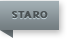
<style>
.page{position:relative;width:70px;height:40px}
.page>*{position:absolute;margin:0}
.t1{font:10.8px "Delicious-Bold";letter-spacing:0.025em;color:#4b5254;font-weight:bold;scale:1.32 1}
</style>
<div class="page">
<p class="t1" style="left:12px;top:11px;width:36px;height:8px">STARO</p>
</div>
